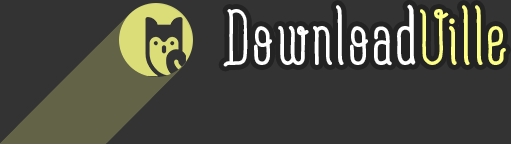
<style>
.page{position:relative;width:511px;height:144px;background:#333333}
.page>*{position:absolute;margin:0}
.t1{font:80px "Cutepunk-Bold";letter-spacing:0.075em;color:#ffffff}
.t2{font:80px "Cutepunk-Bold";letter-spacing:0.075em;color:#fdff87}
</style>
<div class="page">
<p class="t1" style="left:223px;top:4px;width:283px;height:63px">Download<span class="t2">Ville</span></p>
</div>
